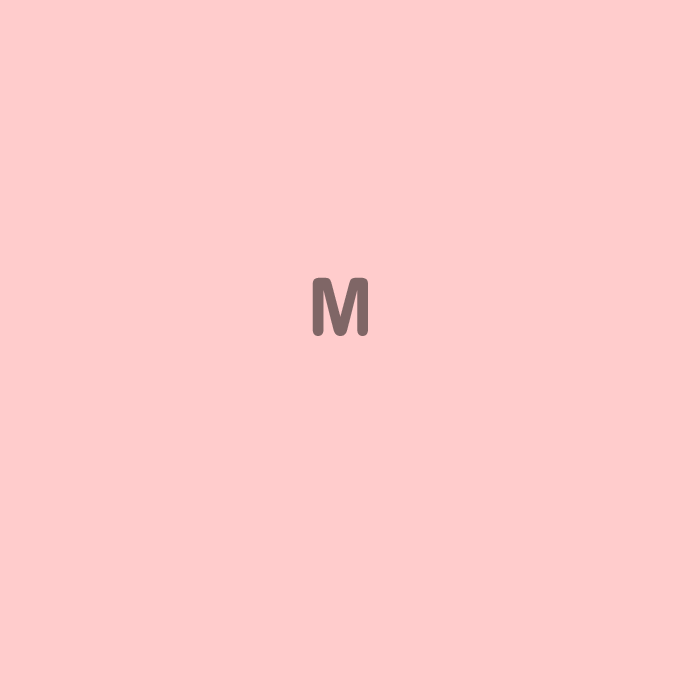
<style>
.page{position:relative;width:700px;height:700px;background:#ffcccc}
.page>*{position:absolute;margin:0}
.t1{font:80px "ArialRoundedMTBold";color:#7f6666}
</style>
<div class="page">
<p class="t1" style="left:312px;top:277px;width:56px;height:59px">M</p>
</div>
